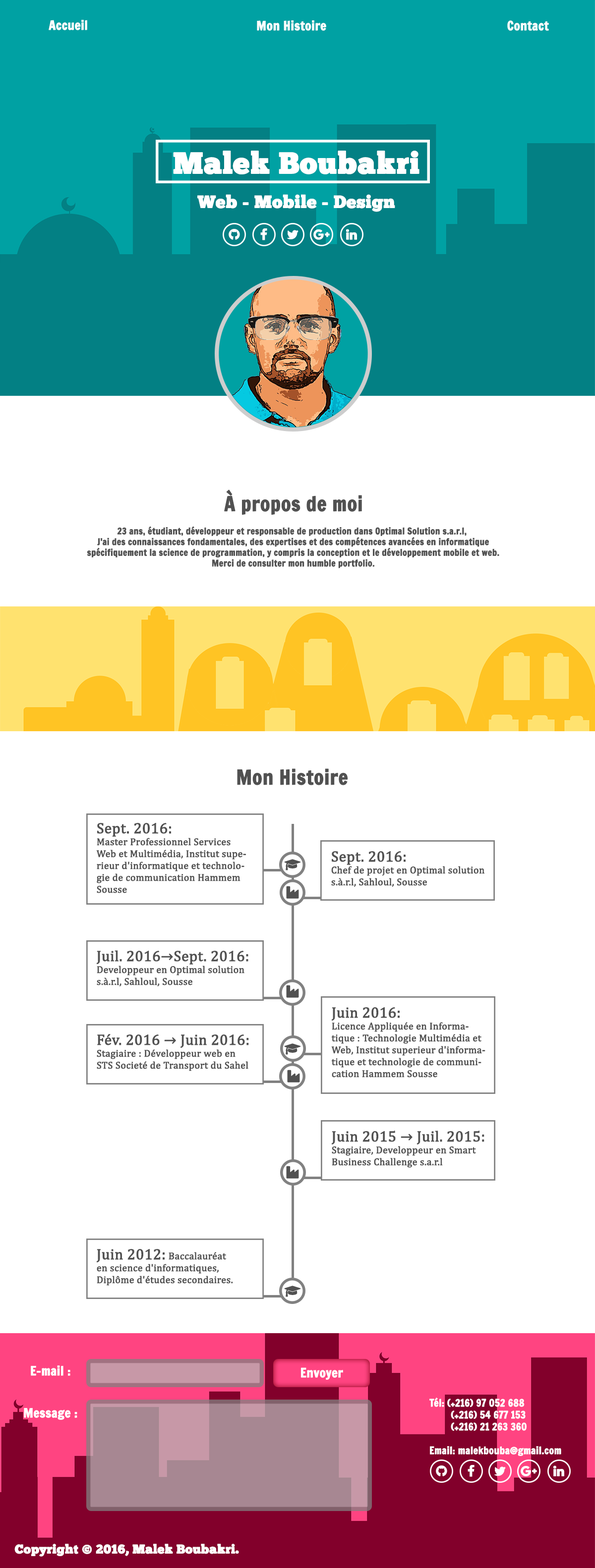
<style>
.page{position:relative;width:595px;height:1568px;background:#ffffff}
.page>*{position:absolute;margin:0}
.t1{font:12.4px "FrancoisOne";color:#ffffff;font-weight:bold}
.t2{font:29.7px "ChunkFive-Roman";color:#ffffff;font-weight:bold}
.t3{font:17.3px "ChunkFive-Roman";color:#ffffff;font-weight:bold}
.t4{font:19.8px "FrancoisOne";color:#515151;font-weight:bold}
.t5{font:8.9px "FrancoisOne";color:#515151;font-weight:bold}
.t6{font:9.9px "CambriaMath";color:#515151;font-weight:bold}
.t7{font:14.9px "CambriaMath";color:#515151;font-weight:bold}
.t8{font:9.9px "FrancoisOne";color:#ffffff;font-weight:bold}
.t9{font:12.4px "ChunkFive-Roman";color:#ffffff;font-weight:bold}
</style>
<div class="page">
<p class="t1" style="left:49px;top:20px;width:38px;height:10px">Accueil</p>
<p class="t1" style="left:257px;top:20px;width:69px;height:11px">Mon Histoire</p>
<p class="t1" style="left:507px;top:20px;width:41px;height:11px">Contact</p>
<p class="t2" style="left:173px;top:151px;width:246px;height:23px">Malek Boubakri</p>
<p class="t3" style="left:197px;top:194px;width:198px;height:18px">Web - Mobile - Design</p>
<p class="t4" style="left:224px;top:489px;width:138px;height:26px">À propos de moi</p>
<p class="t5" style="left:87px;top:526px;width:412px;height:42px;text-align:center">23 ans, étudiant, développeur et responsable de production dans Optimal Solution s.a.r.l, <br>J'ai des connaissances fondamentales, des expertises et des compétences avancées en informatique<br>spécifiquement la science de programmation, y compris la conception et le développement mobile et web.<br>Merci de consulter mon humble portfolio.</p>
<p class="t4" style="left:237px;top:768px;width:111px;height:17px">Mon Histoire</p>
<p class="t6" style="left:96px;top:823px;width:150px;height:70px"><span class="t7">Sept. 2016:</span> <br>Master Professionnel Services Web et Multimédia, Institut superieur d'informatique et technologie de communication Hammem Sousse</p>
<p class="t6" style="left:331px;top:851px;width:153px;height:36px"><span class="t7">Sept. 2016:</span><br>Chef de projet en Optimal solution s.à.r.l, Sahloul, Sousse</p>
<p class="t6" style="left:96px;top:950px;width:152px;height:36px"><span class="t7">Juil. 2016→Sept. 2016:</span> <br>Developpeur en Optimal solution s.à.r.l, Sahloul, Sousse</p>
<p class="t6" style="left:331px;top:1007px;width:154px;height:71px"><span class="t7">Juin 2016:</span> <br>Licence Appliquée en Informatique : Technologie Multimédia et Web, Institut superieur d'informatique et technologie de communication Hammem Sousse</p>
<p class="t6" style="left:97px;top:1034px;width:152px;height:37px"><span class="t7">Fév. 2016 → Juin 2016:</span> <br>Stagiaire : Développeur web en STS Societé de Transport du Sahel</p>
<p class="t6" style="left:331px;top:1131px;width:153px;height:37px"><span class="t7">Juin 2015 → Juil. 2015:</span><br>Stagiaire, Developpeur en Smart Business Challenge s.a.r.l<br>Diplôme d'études secondaires.</p>
<p class="t6" style="left:96px;top:1249px;width:137px;height:37px"><span class="t7">Juin 2012:</span> Baccalauréat<br>en science d'informatiques,<br>Diplôme d'études secondaires.</p>
<p class="t1" style="left:31px;top:1365px;width:39px;height:11px">E-mail :</p>
<p class="t1" style="left:301px;top:1367px;width:42px;height:13px">Envoyer</p>
<p class="t8" style="left:429px;top:1398px;width:132px;height:58px">Tél: (+216) 97 052 688<br>        (+216) 54 677 153<br>        (+216) 21 263 360<br><br>Email: malekbouba@gmail.com</p>
<p class="t1" style="left:24px;top:1408px;width:53px;height:12px">Message :</p>
<p class="t9" style="left:14px;top:1544px;width:225px;height:13px">Copyright © 2016, Malek Boubakri.</p>
</div>
